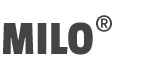
<style>
.page{position:relative;width:168px;height:57px;background:#ffffff}
.page>*{position:absolute;margin:0}
.t1{font:36px "Francy-Regular";letter-spacing:0.1em;color:#444444}
.t2{font:50px "PassionOne-Regular";color:#444444}
</style>
<div class="page">
<p class="t1" style="left:96px;top:15px;width:16px;height:17px">®</p>
<p class="t2" style="left:3px;top:22px;width:90px;height:33px">MILO</p>
</div>
